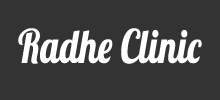
<style>
.page{position:relative;width:220px;height:100px;background:#333333}
.page>*{position:absolute;margin:0}
.t1{font:46px "Lobster1.4";letter-spacing:-0.02em;color:#ffffff;font-weight:bold;scale:0.8 1}
</style>
<div class="page">
<p class="t1" style="left:18px;top:28px;width:184px;height:36px">Radhe Clinic</p>
</div>
